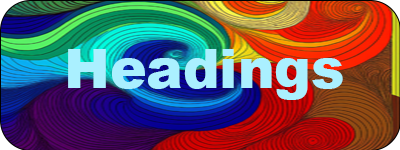
<style>
.page{position:relative;width:400px;height:150px}
.page>*{position:absolute;margin:0}
.t1{font:54.7px "Arial-Black";color:#aaf0ff}
</style>
<div class="page">
<p class="t1" style="left:68px;top:49px;width:275px;height:51px">Headings</p>
</div>
